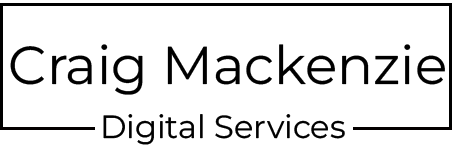
<style>
.page{position:relative;width:461px;height:145px;background:#ffffff}
.page>*{position:absolute;margin:0}
.t1{font:53.3px "MontserratRoman-Regular";color:#000000}
.t2{font:32px "MontserratRoman-Regular";color:#000000}
</style>
<div class="page">
<p class="t1" style="left:10px;top:44px;width:435px;height:51px">Craig Mackenzie</p>
<p class="t2" style="left:103px;top:114px;width:242px;height:31px">Digital Services</p>
</div>
